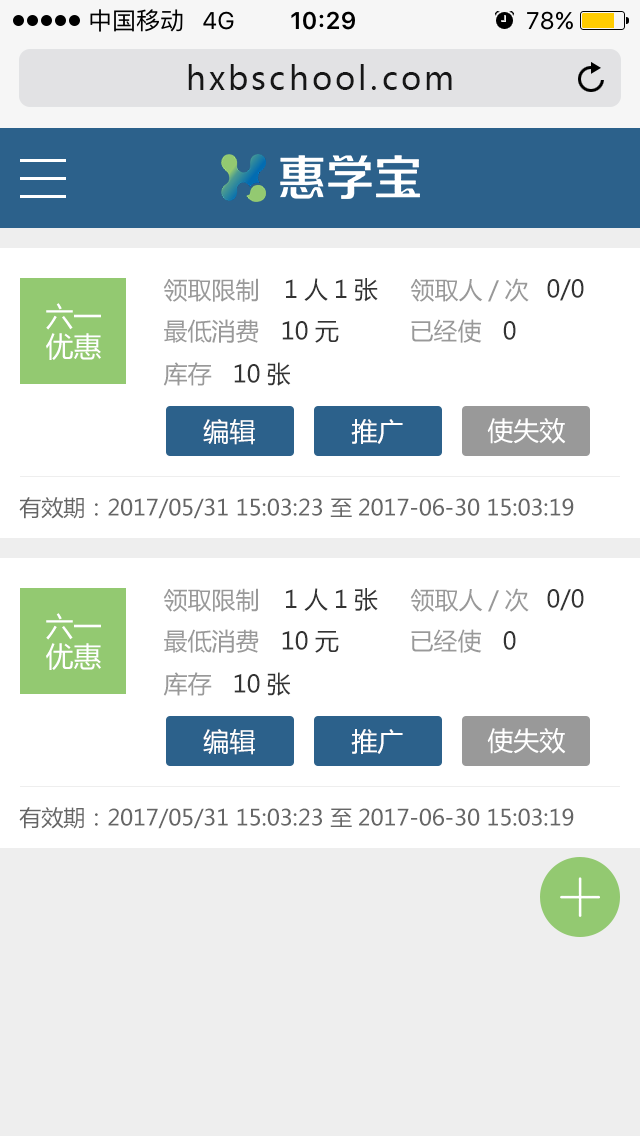
<style>
.page{position:relative;width:640px;height:1136px;background:#ffffff}
.page>*{position:absolute;margin:0}
.t1{font:32px "MicrosoftYaHei";letter-spacing:0.1em;color:#171717}
.t2{font:24px "MicrosoftYaHei";color:#999999}
.t3{font:24px "MicrosoftYaHei";color:#333333}
.t4{font:28px/30px "MicrosoftYaHei";color:#ffffff}
.t5{font:26px "MicrosoftYaHei";color:#ffffff}
.t6{font:22px "MicrosoftYaHei";color:#666666}
</style>
<div class="page">
<p class="t1" style="left:188px;top:64px;width:264px;height:26px">hxbschool.com</p>
<p class="t2" style="left:163px;top:278px;width:95px;height:24px">领取限制</p>
<p class="t3" style="left:286px;top:278px;width:92px;height:24px">1人1张</p>
<p class="t2" style="left:410px;top:278px;width:119px;height:24px">领取人/次</p>
<p class="t3" style="left:547px;top:279px;width:37px;height:22px">0/0</p>
<p class="t4" style="left:46px;top:303px;width:55px;height:57px">六一<br>优惠</p>
<p class="t2" style="left:164px;top:319px;width:175px;height:24px">最低消费   <span class="t3">10元</span></p>
<p class="t2" style="left:411px;top:319px;width:105px;height:24px">已经使   <span class="t3">0</span></p>
<p class="t3" style="left:163px;top:362px;width:128px;height:24px"><span class="t2">库存   </span>10张</p>
<p class="t5" style="left:203px;top:419px;width:52px;height:26px">编辑</p>
<p class="t5" style="left:351px;top:419px;width:52px;height:25px">推广</p>
<p class="t5" style="left:487px;top:418px;width:79px;height:26px">使失效</p>
<p class="t6" style="left:19px;top:497px;width:555px;height:22px">有效期：2017/05/31 15:03:23 至2017-06-30 15:03:19</p>
<p class="t2" style="left:163px;top:588px;width:95px;height:24px">领取限制</p>
<p class="t3" style="left:286px;top:588px;width:92px;height:24px">1人1张</p>
<p class="t2" style="left:410px;top:588px;width:119px;height:24px">领取人/次</p>
<p class="t3" style="left:547px;top:589px;width:37px;height:22px">0/0</p>
<p class="t4" style="left:46px;top:613px;width:55px;height:57px">六一<br>优惠</p>
<p class="t2" style="left:164px;top:629px;width:175px;height:24px">最低消费   <span class="t3">10元</span></p>
<p class="t2" style="left:411px;top:629px;width:105px;height:24px">已经使   <span class="t3">0</span></p>
<p class="t3" style="left:163px;top:672px;width:128px;height:24px"><span class="t2">库存   </span>10张</p>
<p class="t5" style="left:203px;top:729px;width:52px;height:26px">编辑</p>
<p class="t5" style="left:351px;top:729px;width:52px;height:25px">推广</p>
<p class="t5" style="left:487px;top:728px;width:79px;height:26px">使失效</p>
<p class="t6" style="left:19px;top:807px;width:555px;height:22px">有效期：2017/05/31 15:03:23 至2017-06-30 15:03:19</p>
</div>
